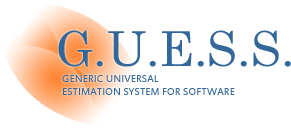
<style>
.page{position:relative;width:291px;height:128px;background:#ffffff}
.page>*{position:absolute;margin:0}
.t1{font:48px "CenturySchoolbook";color:#336699}
.t2{font:11.1px "EstrangeloEdessa";color:#336699}
</style>
<div class="page">
<p class="t1" style="left:58px;top:30px;width:233px;height:37px">G.U.E.S.S.</p>
<p class="t2" style="left:62px;top:75px;width:173px;height:20px">GENERIC UNIVERSAL<br>ESTIMATION SYSTEM FOR SOFTWARE</p>
</div>
